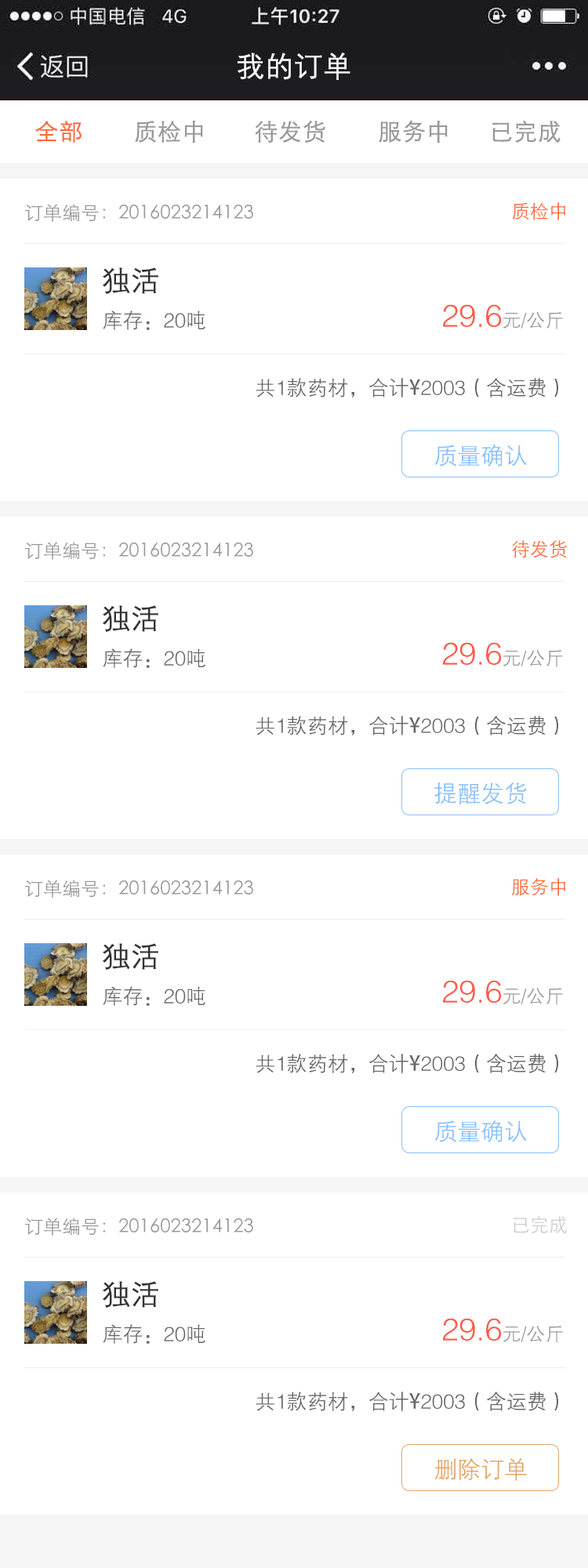
<style>
.page{position:relative;width:588px;height:1568px;background:#ffffff}
.page>*{position:absolute;margin:0}
.t1{font:28.2px "FZZDXJW--GB1-0";color:#ffffff;font-weight:bold}
.t2{font:23.5px "STXihei";color:#fb6936;font-weight:bold}
.t3{font:23.5px "STXihei";color:#999999;font-weight:bold}
.t4{font:18.8px "STXihei";color:#999999}
.t5{font:18.8px "STXihei";color:#fb6936}
.t6{font:28.2px "FZZDXJW--GB1-0";color:#333333;font-weight:bold}
.t7{font:31.4px "FZZDXJW--GB1-0";color:#ff5a49}
.t8{font:18.8px "FZZDXJW--GB1-0";color:#999999}
.t9{font:20.4px "FZZDXJW--GB1-0";color:#666666}
.t10{font:20.4px "AdobeHeitiStd-Regular";color:#666666}
.t11{font:23.5px "FZZDXJW--GB1-0";color:#87bffd}
.t12{font:18.8px "STXihei";color:#cccccc}
.t13{font:23.5px "FZZDXJW--GB1-0";color:#e4a663}
</style>
<div class="page">
<p class="t1" style="left:238px;top:53px;width:112px;height:27px">我的订单</p>
<p class="t2" style="left:35px;top:121px;width:47px;height:22px">全部</p>
<p class="t3" style="left:135px;top:120px;width:68px;height:23px">质检中</p>
<p class="t3" style="left:255px;top:120px;width:70px;height:23px">待发货</p>
<p class="t3" style="left:379px;top:120px;width:69px;height:23px">服务中</p>
<p class="t3" style="left:492px;top:120px;width:69px;height:23px">已完成</p>
<p class="t4" style="left:25px;top:204px;width:228px;height:18px">订单编号：2016023214123</p>
<p class="t5" style="left:512px;top:202px;width:53px;height:18px">质检中</p>
<p class="t6" style="left:103px;top:267px;width:55px;height:27px">独活</p>
<p class="t7" style="left:443px;top:304px;width:120px;height:25px">29.6<span class="t8">元/公斤</span></p>
<p class="t9" style="left:103px;top:310px;width:102px;height:20px">库存：20吨</p>
<p class="t9" style="left:256px;top:378px;width:302px;height:19px">共1款药材，合计<span class="t10">¥</span>2003（含运费）</p>
<p class="t11" style="left:434px;top:445px;width:93px;height:21px">质量确认</p>
<p class="t4" style="left:25px;top:542px;width:228px;height:18px">订单编号：2016023214123</p>
<p class="t5" style="left:512px;top:540px;width:55px;height:18px">待发货</p>
<p class="t6" style="left:103px;top:605px;width:55px;height:27px">独活</p>
<p class="t9" style="left:103px;top:648px;width:102px;height:20px">库存：20吨</p>
<p class="t7" style="left:443px;top:642px;width:120px;height:25px">29.6<span class="t8">元/公斤</span></p>
<p class="t9" style="left:256px;top:716px;width:302px;height:19px">共1款药材，合计<span class="t10">¥</span>2003（含运费）</p>
<p class="t11" style="left:434px;top:782px;width:93px;height:22px">提醒发货</p>
<p class="t4" style="left:25px;top:880px;width:228px;height:18px">订单编号：2016023214123</p>
<p class="t5" style="left:511px;top:878px;width:54px;height:18px">服务中</p>
<p class="t6" style="left:103px;top:943px;width:55px;height:27px">独活</p>
<p class="t9" style="left:103px;top:986px;width:102px;height:20px">库存：20吨</p>
<p class="t7" style="left:443px;top:980px;width:120px;height:25px">29.6<span class="t8">元/公斤</span></p>
<p class="t9" style="left:256px;top:1054px;width:302px;height:19px">共1款药材，合计<span class="t10">¥</span>2003（含运费）</p>
<p class="t11" style="left:434px;top:1120px;width:93px;height:22px">质量确认</p>
<p class="t4" style="left:25px;top:1218px;width:228px;height:18px">订单编号：2016023214123</p>
<p class="t12" style="left:514px;top:1216px;width:53px;height:18px">已完成</p>
<p class="t6" style="left:103px;top:1281px;width:55px;height:27px">独活</p>
<p class="t9" style="left:103px;top:1324px;width:102px;height:20px">库存：20吨</p>
<p class="t7" style="left:443px;top:1318px;width:120px;height:25px">29.6<span class="t8">元/公斤</span></p>
<p class="t9" style="left:256px;top:1392px;width:302px;height:19px">共1款药材，合计<span class="t10">¥</span>2003（含运费）</p>
<p class="t13" style="left:434px;top:1458px;width:93px;height:23px">删除订单</p>
</div>
